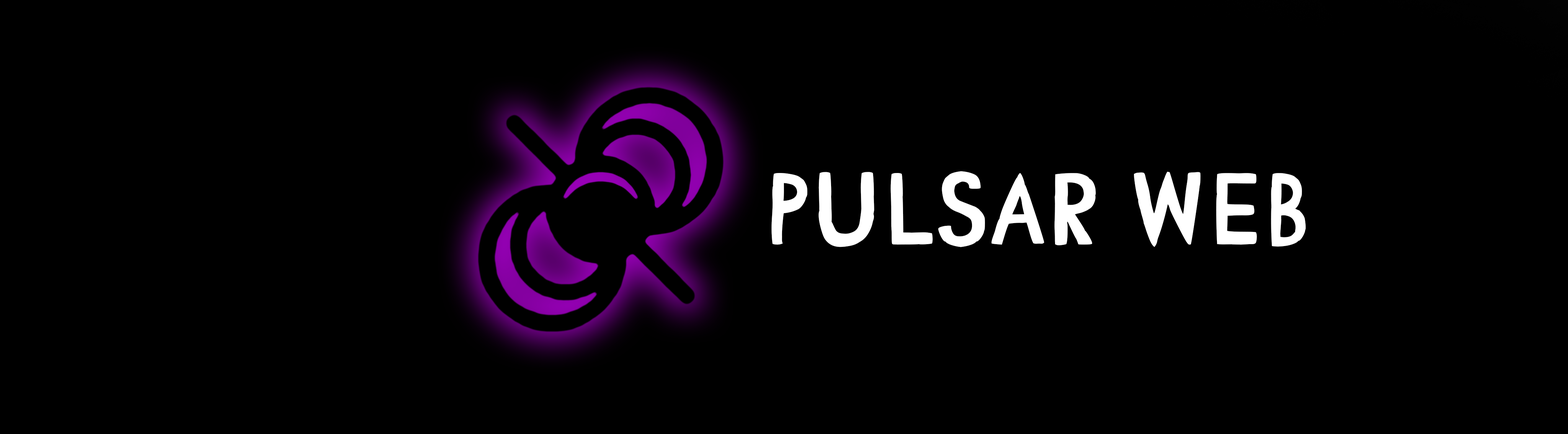
<style>
.page{position:relative;width:1568px;height:434px;background:#000000}
.page>*{position:absolute;margin:0}
.t1{font:102px "ComicCAT";color:#ffffff}
</style>
<div class="page">
<p class="t1" style="left:771px;top:171px;width:535px;height:76px">Pulsar Web</p>
</div>
